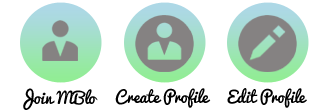
<style>
.page{position:relative;width:309px;height:111px;background:#ffffff}
.page>*{position:absolute;margin:0}
.t1{font:16px "Pacifico";color:#000000}
</style>
<div class="page">
<p class="t1" style="left:23px;top:88px;width:75px;height:22px">Join MBlo</p>
<p class="t1" style="left:115px;top:88px;width:96px;height:20px">Create Profile</p>
<p class="t1" style="left:227px;top:88px;width:80px;height:20px">Edit Profile</p>
</div>
